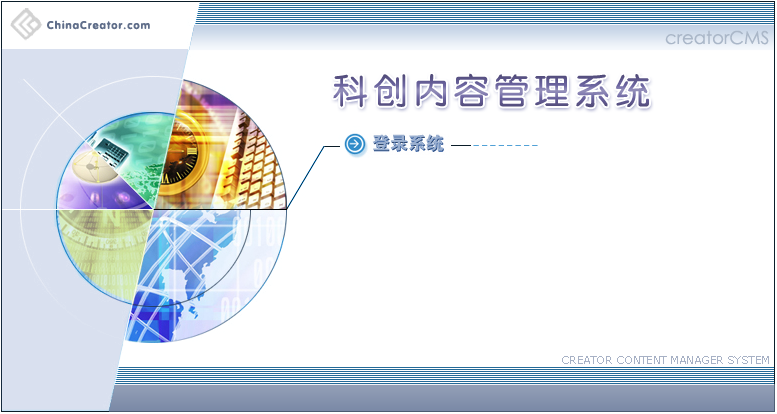
<style>
.page{position:relative;width:777px;height:414px;background:#ffffff}
.page>*{position:absolute;margin:0}
.t1{font:11px "FZY4JW--GB1-0";letter-spacing:0.1em;color:#606e8a}
.t2{font:18px "CenturyGothic";color:#aab7c8}
.t3{font:35px "FZY3JW--GB1-0";letter-spacing:0.15em}
.t4{font:11px "Verdana";letter-spacing:-0.05em;color:#a7b1c5}
</style>
<div class="page">
<p class="t1" style="left:47px;top:20px;width:103px;height:10px">ChinaCreator.com</p>
<p class="t2" style="left:665px;top:30px;width:104px;height:15px">creatorCMS</p>
<p class="t3" style="left:333px;top:73px;width:316px;height:35px">科创内容管理系统</p>
<p class="t4" style="left:562px;top:356px;width:207px;height:8px">CREATOR CONTENT MANAGER SYSTEM</p>
</div>
